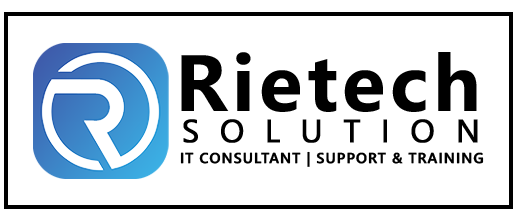
<style>
.page{position:relative;width:520px;height:220px;background:#ffffff}
.page>*{position:absolute;margin:0}
.t1{font:79.8px "SegoeUI-Bold";letter-spacing:0.06em;color:#000000}
.t2{font:31.9px "SegoeUI";letter-spacing:0.633em;color:#000000;font-weight:bold}
.t3{font:14.6px "SegoeUI-Semibold";letter-spacing:0.045em;color:#000000;font-weight:bold}
</style>
<div class="page">
<p class="t1" style="left:181px;top:52px;width:296px;height:60px">Rietech</p>
<p class="t2" style="left:183px;top:119px;width:295px;height:24px">SOLUTION</p>
<p class="t3" style="left:180px;top:151px;width:304px;height:16px">IT CONSULTANT | SUPPORT &amp; TRAINING</p>
</div>
